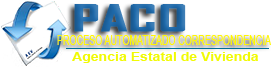
<style>
.page{position:relative;width:271px;height:67px;background:#ffffff}
.page>*{position:absolute;margin:0}
.t1{font:35.1px "AgencyFB-Bold";color:#1e69aa;font-weight:bold;scale:1.68 1}
.t2{font:13.6px "ArialMT";color:#fff600;scale:0.67 1}
.t3{font:11.8px "Arial-BoldMT";color:#f1fa05;scale:1.19 1}
</style>
<div class="page">
<p class="t1" style="left:74px;top:4px;width:112px;height:28px">PACO</p>
<p class="t2" style="left:57px;top:35px;width:214px;height:10px">PROCESO AUTOMATIZADO CORRESPONDENCIA</p>
<p class="t3" style="left:72px;top:52px;width:186px;height:11px">Agencia Estatal de Vivienda</p>
</div>
